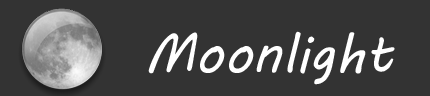
<style>
.page{position:relative;width:430px;height:96px;background:#333333}
.page>*{position:absolute;margin:0}
.t1{font:54px "MVBoli";color:#ffffff}
</style>
<div class="page">
<p class="t1" style="left:148px;top:31px;width:247px;height:54px">Moonlight</p>
</div>
